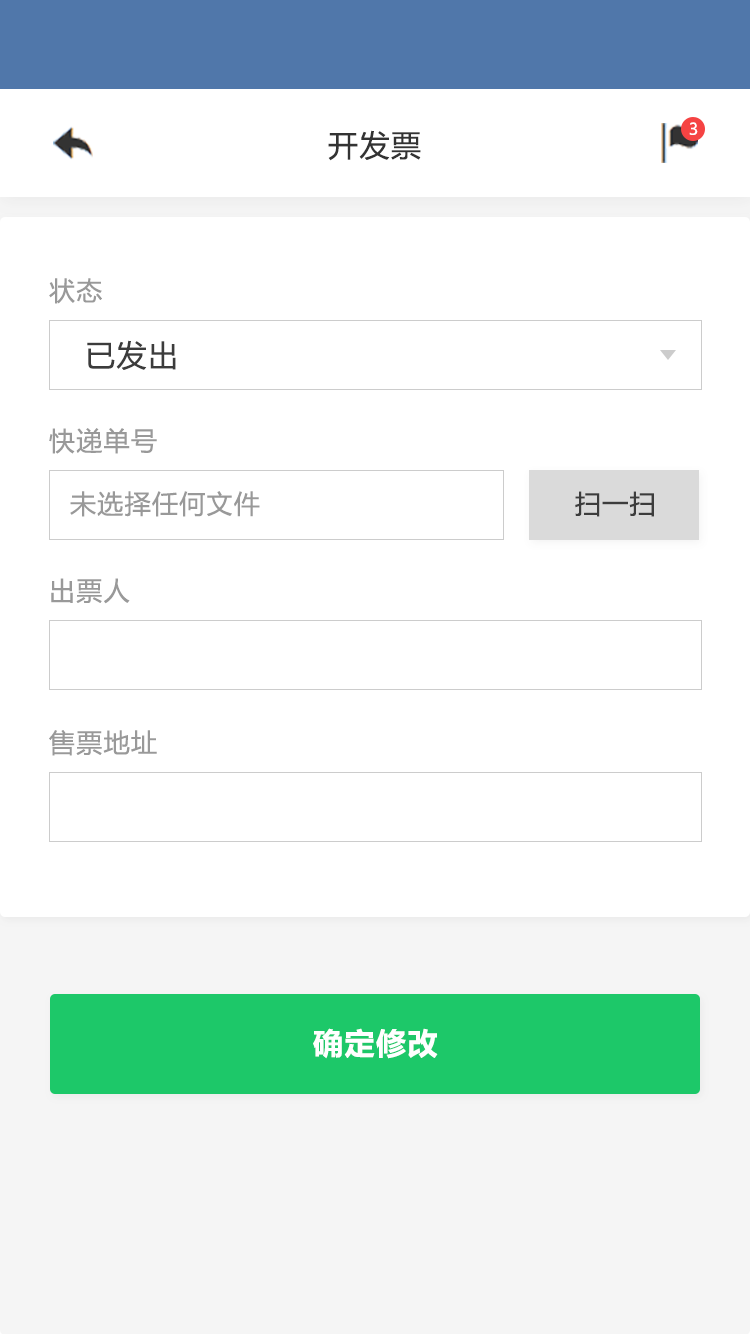
<style>
.page{position:relative;width:750px;height:1334px;background:#ffffff}
.page>*{position:absolute;margin:0}
.t1{font:16px "MicrosoftYaHeiUI";color:#ffffff}
.t2{font:30px "MicrosoftYaHeiUI";letter-spacing:0.05em;color:#333333}
.t3{font:26px "MicrosoftYaHeiUI";letter-spacing:0.05em;color:#999999}
.t4{font:30px "MicrosoftYaHeiUI";letter-spacing:0.05em;color:#3c3c3c}
.t5{font:26px "MicrosoftYaHeiUI";letter-spacing:0.05em;color:#3c3c3c}
.t6{font:30px "MicrosoftYaHeiUI-Bold";letter-spacing:0.05em;color:#ffffff}
</style>
<div class="page">
<p class="t1" style="left:689px;top:122px;width:9px;height:13px">3</p>
<p class="t2" style="left:328px;top:130px;width:93px;height:31px">开发票</p>
<p class="t3" style="left:49px;top:278px;width:53px;height:26px">状态</p>
<p class="t4" style="left:87px;top:340px;width:89px;height:30px">已发出</p>
<p class="t3" style="left:49px;top:428px;width:108px;height:26px">快递单号</p>
<p class="t3" style="left:70px;top:491px;width:190px;height:26px">未选择任何文件</p>
<p class="t5" style="left:575px;top:491px;width:79px;height:26px">扫一扫</p>
<p class="t3" style="left:51px;top:578px;width:79px;height:26px">出票人</p>
<p class="t3" style="left:49px;top:730px;width:108px;height:26px">售票地址</p>
<p class="t6" style="left:313px;top:1028px;width:125px;height:31px">确定修改</p>
</div>
